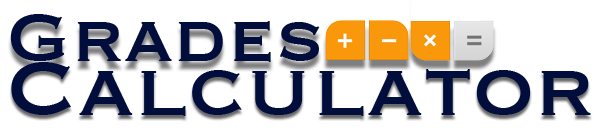
<style>
.page{position:relative;width:600px;height:130px;background:#ffffff}
.page>*{position:absolute;margin:0}
.t1{font:88px "Copperplate";color:#010e3b}
.t2{font:100px "Copperplate";color:#010e3b}
</style>
<div class="page">
<p class="t1" style="left:10px;top:14px;width:310px;height:48px">Grades</p>
<p class="t2" style="left:11px;top:62px;width:580px;height:54px">Calculator</p>
</div>
